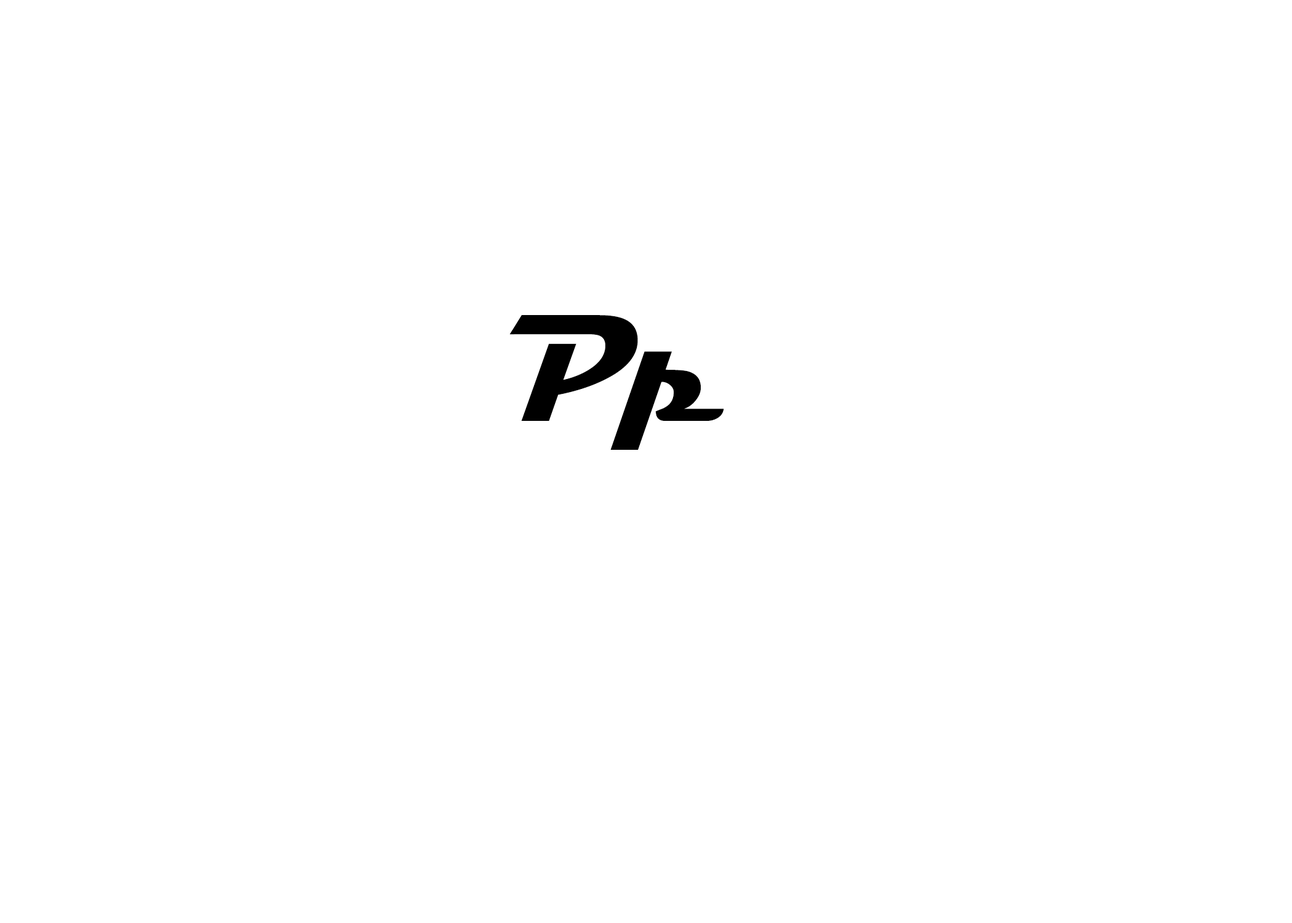
<style>
.page{position:relative;width:1292px;height:923px;background:#ffffff}
.page>*{position:absolute;margin:0}
.t1{font:153.8px "Magneto-Bold";color:#000000}
.t2{font:153.8px "Magneto-Bold";color:#ffffff}
</style>
<div class="page">
<p class="t1" style="left:386px;top:315px;width:338px;height:135px"><span class="t2">P</span>Pp</p>
</div>
